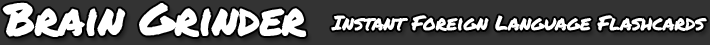
<style>
.page{position:relative;width:710px;height:45px;background:#333333}
.page>*{position:absolute;margin:0}
.t1{font:44px "PermanentMarker";letter-spacing:-0.025em;color:#ffffff;font-weight:bold}
.t2{font:20px "PermanentMarker";letter-spacing:-0.025em;color:#ffffff;font-weight:bold}
</style>
<div class="page">
<p class="t1" style="left:2px;top:2px;width:305px;height:35px">Brain Grinder</p>
<p class="t2" style="left:331px;top:15px;width:376px;height:16px">Instant Foreign Language Flashcards</p>
</div>
